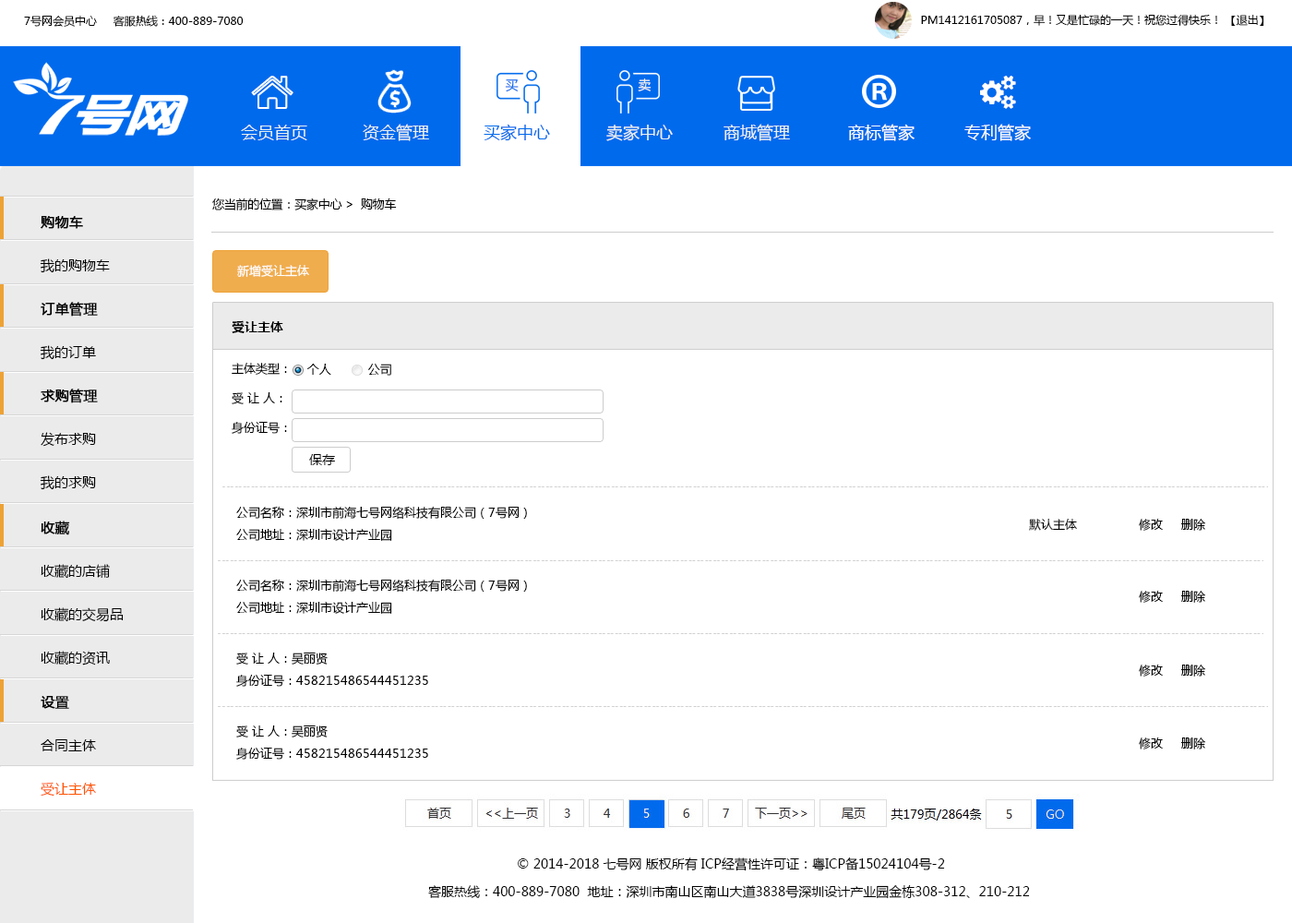
<style>
.page{position:relative;width:1292px;height:923px;background:#ffffff}
.page>*{position:absolute;margin:0}
.t1{font:11.1px "MicrosoftYaHei";color:#000000}
.t2{font:12.9px "MicrosoftYaHei";color:#006aed}
.t3{font:12.9px "MicrosoftYaHei";color:#ecf0f1}
.t4{font:16.6px "MicrosoftYaHei";color:#ecf0f1}
.t5{font:16.6px "MicrosoftYaHei";color:#006aed}
.t6{font:16.6px "MicrosoftYaHei";color:#ffffff}
.t7{font:12px "MicrosoftYaHei";letter-spacing:-0.02em;color:#000000}
.t8{font:13.8px/43.4px "MicrosoftYaHei";color:#000000}
.t9{font:13.8px/43.4px "MicrosoftYaHei";color:#000000;font-weight:bold}
.t10{font:12px "MicrosoftYaHei";color:#ffffff}
.t11{font:12.9px "MicrosoftYaHei-Bold";color:#000000}
.t12{font:12px/29.5px "MicrosoftYaHei";color:#000000}
.t13{font:12px "MicrosoftYaHei";color:#000000}
.t14{font:12.9px "MicrosoftYaHei";color:#000000}
.t15{font:12px/22.1px "MicrosoftYaHei";color:#000000}
.t16{font:13.8px/43.4px "MicrosoftYaHei";color:#ff5400}
.t17{font:12.9px/27.7px "MicrosoftYaHei";color:#000000}
</style>
<div class="page">
<p class="t1" style="left:24px;top:15px;width:220px;height:12px">7号网会员中心     客服热线：400-889-7080</p>
<p class="t1" style="left:921px;top:15px;width:343px;height:11px">PM1412161705087，早！又是忙碌的一天！祝您过得快乐！ 【退出】</p>
<p class="t2" style="left:505px;top:79px;width:14px;height:13px">买</p>
<p class="t3" style="left:638px;top:78px;width:14px;height:13px">卖</p>
<p class="t4" style="left:241px;top:125px;width:66px;height:15px">会员首页</p>
<p class="t4" style="left:363px;top:124px;width:66px;height:17px">资金管理</p>
<p class="t5" style="left:484px;top:124px;width:66px;height:17px">买家中心</p>
<p class="t4" style="left:606px;top:124px;width:67px;height:17px">卖家中心</p>
<p class="t4" style="left:724px;top:124px;width:66px;height:17px">商城管理</p>
<p class="t6" style="left:848px;top:124px;width:67px;height:17px">商标管家</p>
<p class="t6" style="left:964px;top:124px;width:67px;height:17px">专利管家</p>
<p class="t7" style="left:212px;top:197px;width:185px;height:13px">您当前的位置：买家中心 &gt;  购物车</p>
<p class="t8" style="left:40px;top:216px;width:70px;height:57px"><span class="t9">购物车<br></span>我的购物车</p>
<p class="t10" style="left:237px;top:265px;width:72px;height:12px">新增受让主体</p>
<p class="t9" style="left:40px;top:302px;width:58px;height:58px">订单管理<br><span class="t8">我的订单</span></p>
<p class="t11" style="left:232px;top:320px;width:51px;height:13px">受让主体</p>
<p class="t12" style="left:232px;top:363px;width:55px;height:71px">主体类型：<br>受 让 人：<br>身份证号：</p>
<p class="t13" style="left:306px;top:364px;width:85px;height:12px">个人          公司</p>
<p class="t8" style="left:40px;top:389px;width:58px;height:101px"><span class="t9">求购管理<br></span>发布求购<br>我的求购</p>
<p class="t14" style="left:309px;top:454px;width:26px;height:11px">保存</p>
<p class="t15" style="left:236px;top:506px;width:291px;height:35px">公司名称：深圳市前海七号网络科技有限公司（7号网）<br>公司地址：深圳市设计产业园</p>
<p class="t8" style="left:41px;top:521px;width:83px;height:144px"><span class="t9">收藏<br></span>收藏的店铺<br>收藏的交易品<br>收藏的资讯</p>
<p class="t13" style="left:1029px;top:519px;width:48px;height:12px">默认主体</p>
<p class="t13" style="left:1139px;top:519px;width:66px;height:12px">修改     删除</p>
<p class="t15" style="left:236px;top:579px;width:291px;height:35px">公司名称：深圳市前海七号网络科技有限公司（7号网）<br>公司地址：深圳市设计产业园</p>
<p class="t13" style="left:1139px;top:591px;width:66px;height:12px">修改     删除</p>
<p class="t15" style="left:236px;top:652px;width:192px;height:35px">受 让 人：吴丽贤<br>身份证号：458215486544451235</p>
<p class="t13" style="left:1139px;top:664px;width:66px;height:12px">修改     删除</p>
<p class="t8" style="left:41px;top:696px;width:55px;height:100px"><span class="t9">设置<br></span>合同主体<br><span class="t16">受让主体</span></p>
<p class="t15" style="left:236px;top:725px;width:192px;height:35px">受 让 人：吴丽贤<br>身份证号：458215486544451235</p>
<p class="t13" style="left:1139px;top:737px;width:66px;height:12px">修改     删除</p>
<p class="t17" style="left:428px;top:857px;width:602px;height:42px;text-align:center">© 2014-2018 七号网 版权所有 ICP经营性许可证：粤ICP备15024104号-2<br>客服热线：400-889-7080  地址：深圳市南山区南山大道3838号深圳设计产业园金栋308-312、210-212</p>
</div>
